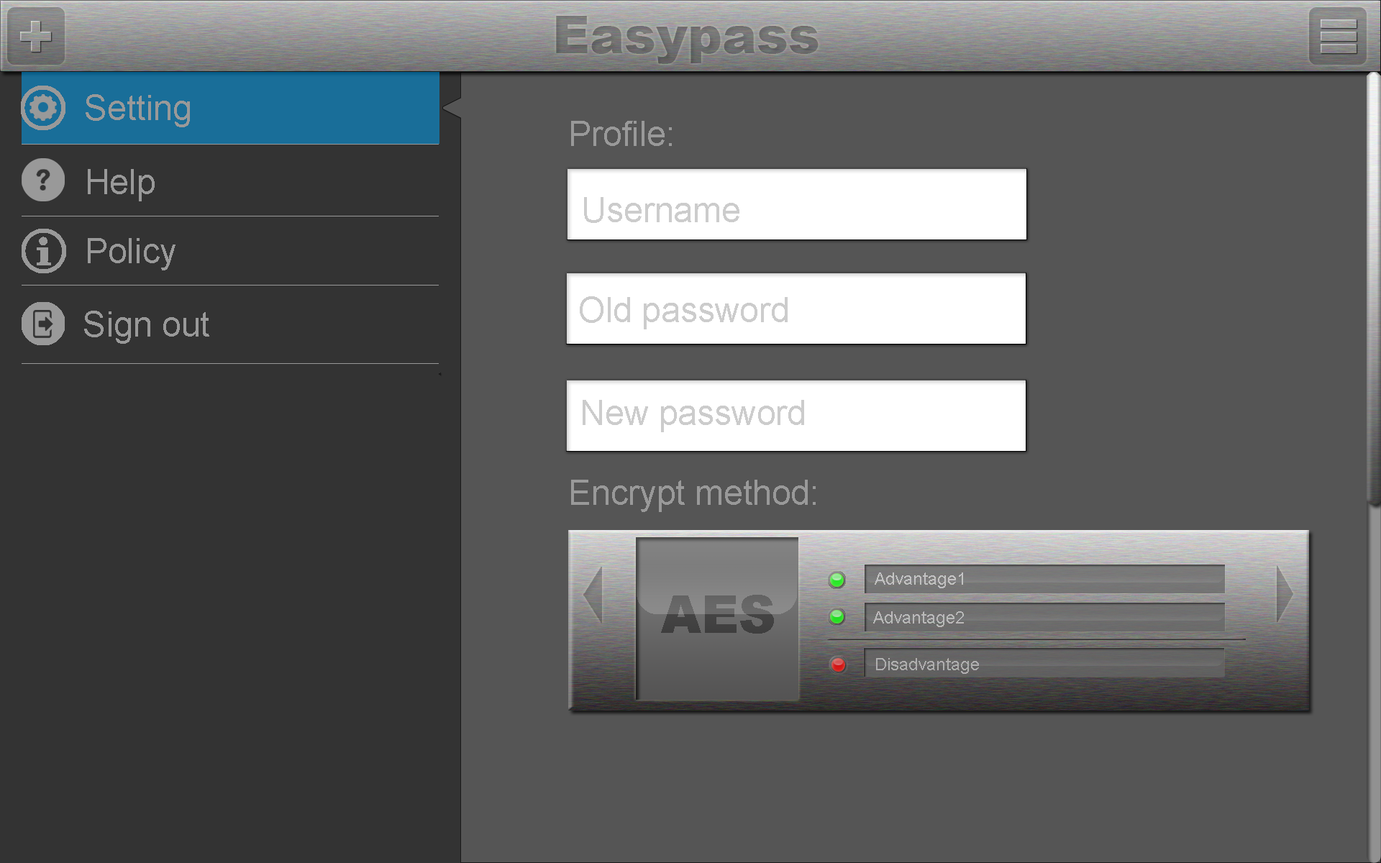
<style>
.page{position:relative;width:1381px;height:863px;background:#555555}
.page>*{position:absolute;margin:0}
.t1{font:34.5px "ArialMT";color:#999999}
.t2{font:34.5px "ArialMT";color:#cccccc}
.t3{font:17.3px "ArialMT";color:#cccccc}
.t4{font:51.8px "Arial-Black"}
.t5{font:17.3px "ArialMT";color:#afaeae}
</style>
<div class="page">
<p class="t1" style="left:86px;top:94px;width:104px;height:33px">Setting</p>
<p class="t1" style="left:571px;top:121px;width:101px;height:25px">Profile:</p>
<p class="t1" style="left:88px;top:169px;width:67px;height:32px">Help</p>
<p class="t2" style="left:584px;top:197px;width:156px;height:26px">Username</p>
<p class="t1" style="left:88px;top:238px;width:88px;height:32px">Policy</p>
<p class="t2" style="left:580px;top:296px;width:208px;height:33px">Old password</p>
<p class="t1" style="left:84px;top:311px;width:125px;height:33px">Sign out</p>
<p class="t2" style="left:583px;top:400px;width:221px;height:32px">New password</p>
<p class="t1" style="left:571px;top:480px;width:245px;height:32px">Encrypt method:</p>
<p class="t3" style="left:875px;top:573px;width:88px;height:15px">Advantage1</p>
<p class="t4" style="left:661px;top:595px;width:113px;height:39px">AES</p>
<p class="t3" style="left:873px;top:611px;width:91px;height:16px">Advantage2</p>
<p class="t5" style="left:876px;top:658px;width:103px;height:16px">Disadvantage</p>
</div>
